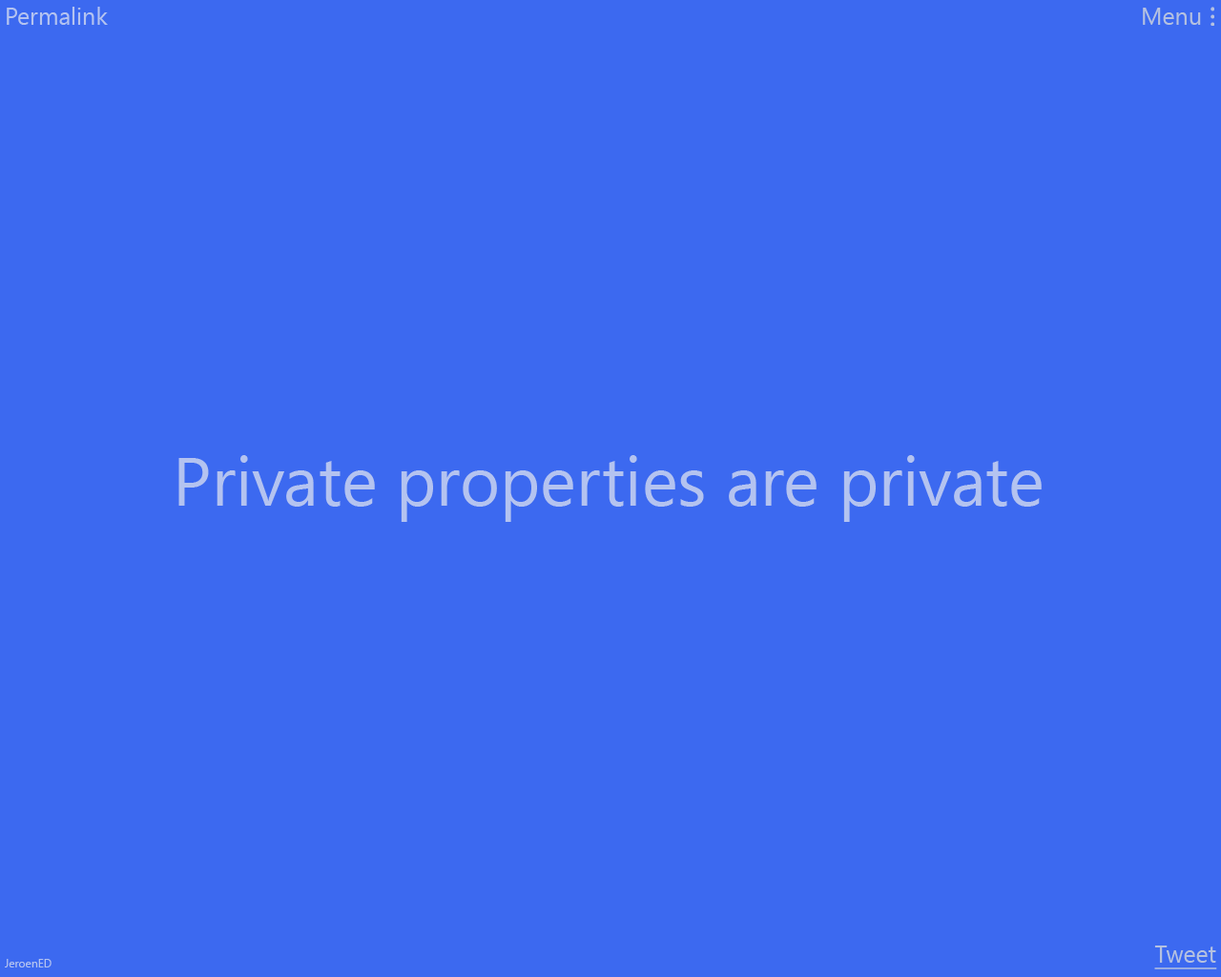
<style>
.page{position:relative;width:1221px;height:977px;background:#3c69f0}
.page>*{position:absolute;margin:0}
.t1{font:23.8px "SegoeUI";color:#b4c3f0}
.t2{font:23.8px "SegoeUI";color:#b5c1e0}
.t3{font:68.7px "SegoeUI";color:#b4c3f0}
.t4{font:23.8px "SegoeUI";color:#b5c1e0;text-decoration:underline}
</style>
<div class="page">
<p class="t1" style="left:7px;top:7px;width:101px;height:18px">Permalink</p>
<p class="t2" style="left:1143px;top:8px;width:58px;height:17px">Menu</p>
<p class="t3" style="left:178px;top:455px;width:864px;height:67px">Private properties are private</p>
<p class="t4" style="left:1154px;top:945px;width:63px;height:24px">Tweet</p>
</div>
